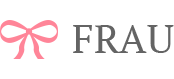
<style>
.page{position:relative;width:174px;height:79px;background:#ffffff}
.page>*{position:absolute;margin:0}
.t1{font:40px "PTSerif-Regular";color:#646464;text-transform:uppercase}
</style>
<div class="page">
<p class="t1" style="left:73px;top:25px;width:101px;height:28px">FRAU</p>
</div>
